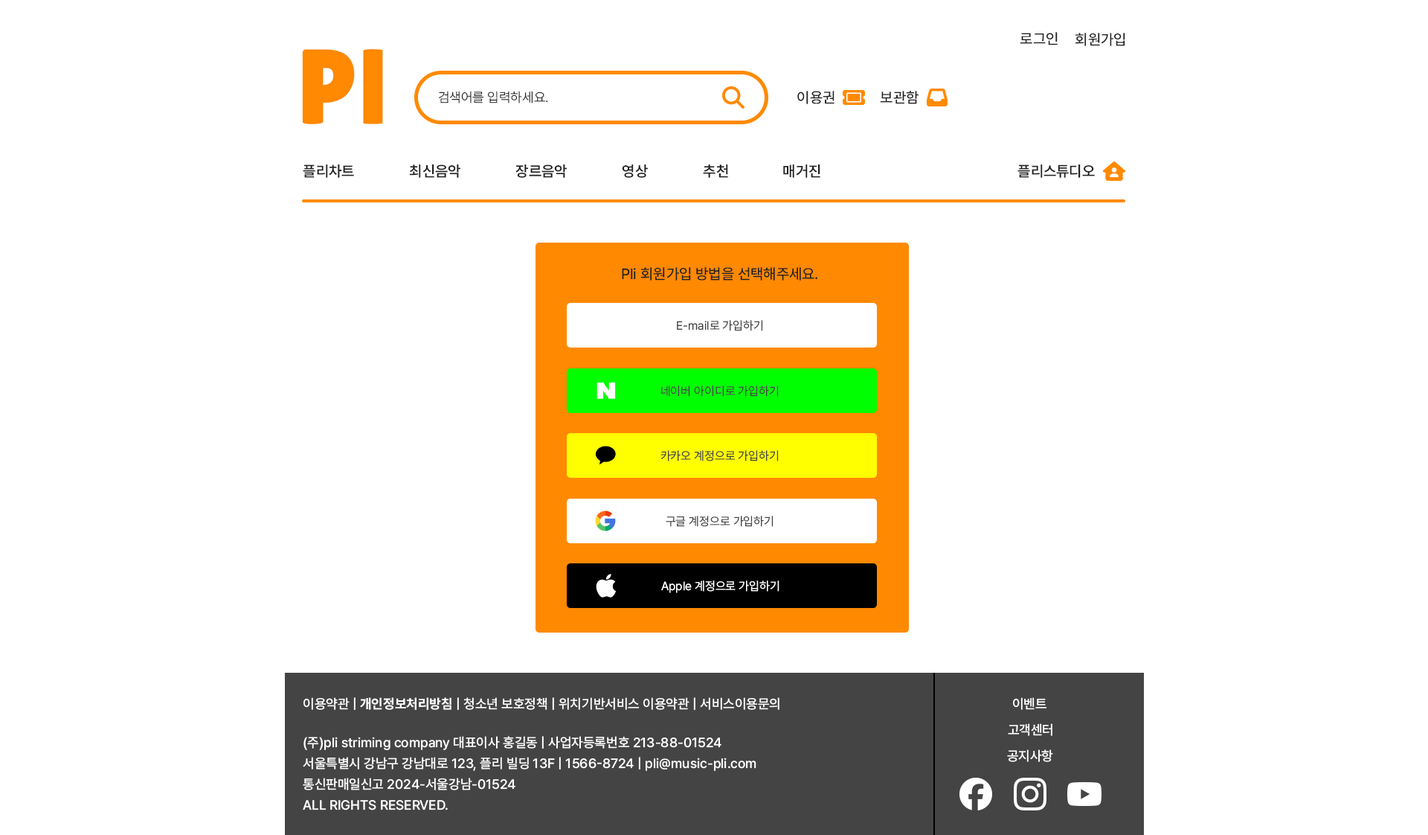
<style>
.page{position:relative;width:1428px;height:835px;background:#ffffff}
.page>*{position:absolute;margin:0}
.t1{font:14.9px "Pretendard-Medium";color:#222222}
.t2{font:13.4px "Pretendard-Light";color:#222222}
.t3{font:14.9px "Pretendard-SemiBold";color:#222222}
.t4{font:11.9px "Pretendard-Regular";color:#444444}
.t5{font:11.9px "Pretendard-Regular";color:#fffefe}
.t6{font:13.4px "Pretendard-Medium";color:#ffffff}
.t7{font:13.4px "Pretendard-Bold";color:#ffffff}
.t8{font:13.4px/20.8px "Pretendard-Medium";color:#ffffff}
</style>
<div class="page">
<p class="t1" style="left:1020px;top:32px;width:38px;height:13px">로그인</p>
<p class="t1" style="left:1075px;top:33px;width:51px;height:13px">회원가입</p>
<p class="t2" style="left:438px;top:91px;width:110px;height:12px">검색어를 입력하세요.</p>
<p class="t1" style="left:798px;top:91px;width:37px;height:13px">이용권</p>
<p class="t1" style="left:880px;top:91px;width:39px;height:13px">보관함</p>
<p class="t3" style="left:303px;top:164px;width:51px;height:14px">플리차트</p>
<p class="t3" style="left:409px;top:164px;width:52px;height:14px">최신음악</p>
<p class="t3" style="left:516px;top:164px;width:51px;height:14px">장르음악</p>
<p class="t3" style="left:622px;top:164px;width:26px;height:14px">영상</p>
<p class="t3" style="left:703px;top:164px;width:25px;height:14px">추천</p>
<p class="t3" style="left:783px;top:164px;width:38px;height:14px">매거진</p>
<p class="t3" style="left:1018px;top:164px;width:77px;height:14px">플리스튜디오</p>
<p class="t1" style="left:622px;top:267px;width:196px;height:13px">Pli 회원가입 방법을 선택해주세요.</p>
<p class="t4" style="left:677px;top:320px;width:86px;height:11px">E-mail로 가입하기</p>
<p class="t4" style="left:661px;top:385px;width:118px;height:12px">네이버 아이디로 가입하기</p>
<p class="t4" style="left:661px;top:450px;width:118px;height:11px">카카오 계정으로 가입하기</p>
<p class="t4" style="left:666px;top:516px;width:108px;height:11px">구글 계정으로 가입하기</p>
<p class="t5" style="left:661px;top:580px;width:119px;height:13px">Apple 계정으로 가입하기</p>
<p class="t6" style="left:304px;top:697px;width:476px;height:13px">이용약관 | <span class="t7">개인정보처리방침</span> | 청소년 보호정책 | 위치기반서비스 이용약관 | 서비스이용문의</p>
<p class="t6" style="left:1013px;top:697px;width:35px;height:13px">이벤트</p>
<p class="t6" style="left:1008px;top:723px;width:45px;height:13px">고객센터</p>
<p class="t8" style="left:303px;top:736px;width:454px;height:74px">(주)pli striming company 대표이사 홍길동 | 사업자등록번호 213-88-01524<br>서울특별시 강남구 강남대로 123, 플리 빌딩 13F | 1566-8724 | pli@music-pli.com<br>통신판매일신고 2024-서울강남-01524      <br>ALL RIGHTS RESERVED.</p>
<p class="t6" style="left:1007px;top:749px;width:46px;height:13px">공지사항</p>
</div>
